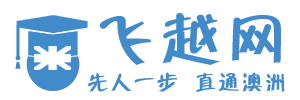
<style>
.page{position:relative;width:300px;height:100px;background:#ffffff}
.page>*{position:absolute;margin:0}
.t1{font:60px "FZZBHJW--GB1-0";letter-spacing:0.1em;color:#428bca}
.t2{font:21.2px "FZZBHJW--GB1-0";letter-spacing:0.1em;color:#428bca}
</style>
<div class="page">
<p class="t1" style="left:99px;top:13px;width:182px;height:52px">飞越网</p>
<p class="t2" style="left:87px;top:72px;width:198px;height:20px">先人一步  直通澳洲</p>
</div>
